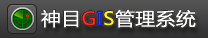
<style>
.page{position:relative;width:208px;height:38px}
.page>*{position:absolute;margin:0}
.t1{font:18px "MicrosoftYaHei";letter-spacing:0.025em;color:#ffffff;scale:1.1 1}
.t2{font:18px "MicrosoftYaHei";letter-spacing:0.025em;color:#ff0000;scale:1.1 1}
.t3{font:18px "MicrosoftYaHei";letter-spacing:0.025em;color:#0006ff;scale:1.1 1}
.t4{font:18px "MicrosoftYaHei";letter-spacing:0.025em;color:#fff000;scale:1.1 1}
</style>
<div class="page">
<p class="t1" style="left:41px;top:9px;width:155px;height:19px">神目<span class="t2">G</span><span class="t3">I</span><span class="t4">S</span>管理系统</p>
</div>
